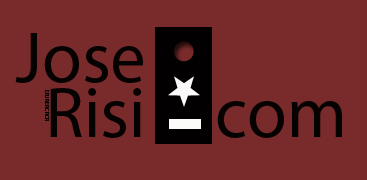
<style>
.page{position:relative;width:367px;height:180px;background:#792b2b}
.page>*{position:absolute;margin:0}
.t1{font:72px "MyriadPro-Regular";color:#060202}
.t2{font:6px "MyriadPro-Regular";color:#040101}
</style>
<div class="page">
<p class="t1" style="left:15px;top:33px;width:128px;height:50px">Jose</p>
<p class="t1" style="left:50px;top:88px;width:91px;height:50px">Risi</p>
<p class="t2" style="left:44px;top:90px;width:6px;height:31px;rotate:90deg">ERJRERCRCR</p>
<p class="t1" style="left:217px;top:101px;width:125px;height:37px">com</p>
</div>
